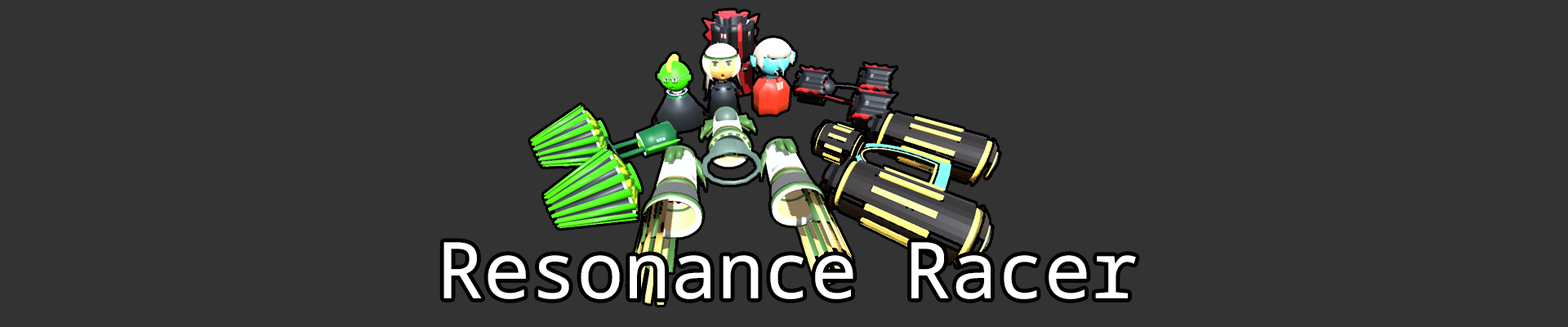
<style>
.page{position:relative;width:1568px;height:327px;background:#333333}
.page>*{position:absolute;margin:0}
.t1{font:77.9px "NotoSansMono-Regular";color:#ffffff}
</style>
<div class="page">
<p class="t1" style="left:443px;top:242px;width:693px;height:57px">Resonance Racer</p>
</div>
